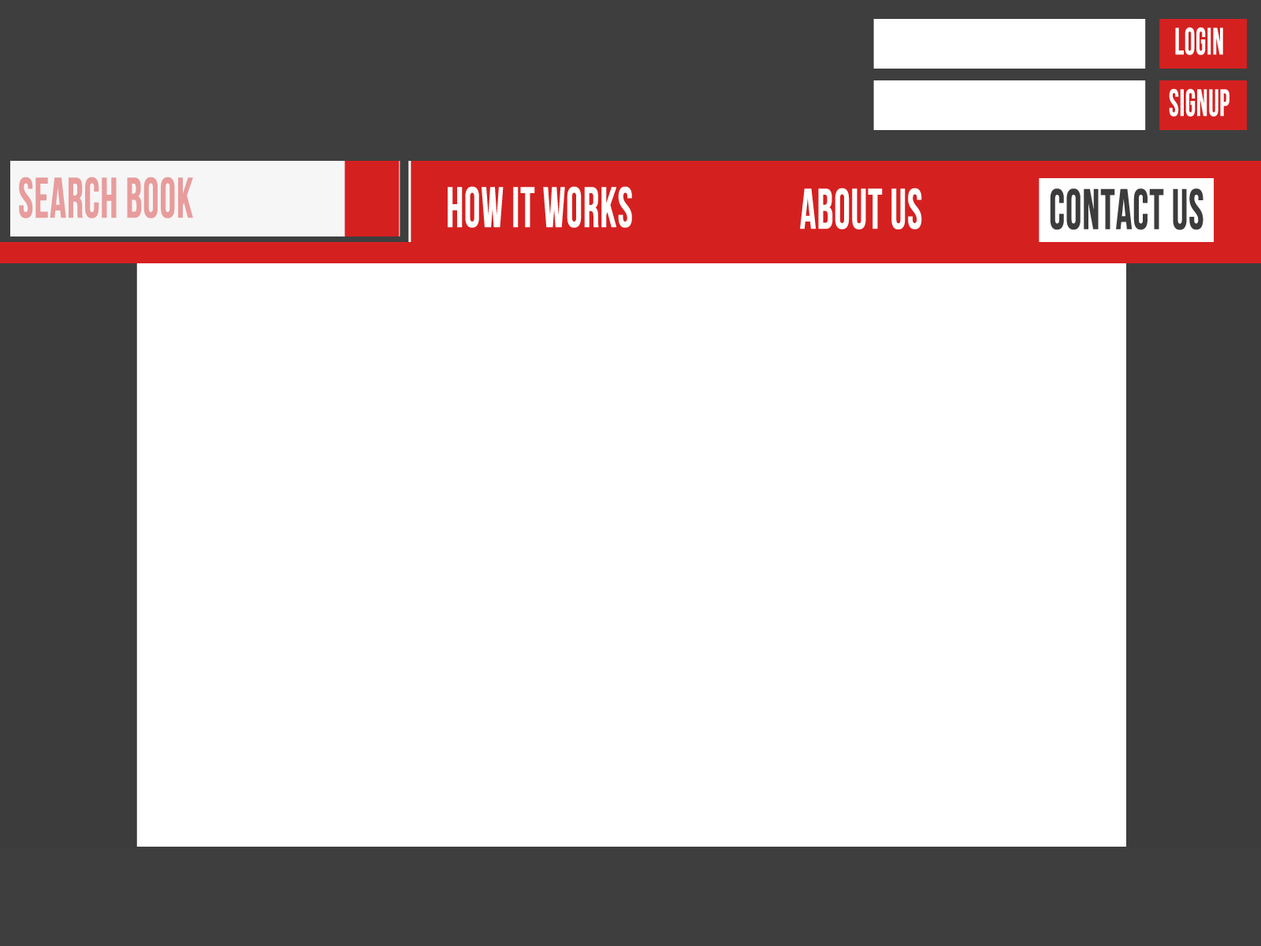
<style>
.page{position:relative;width:1261px;height:946px;background:#ffffff}
.page>*{position:absolute;margin:0}
.t1{font:37.8px "BebasNeue";color:#ffffff;font-weight:bold;scale:0.7 1}
.t2{font:56.7px "BebasNeue";color:#e89c9c;font-weight:bold;scale:0.7 1}
.t3{font:56.7px "BebasNeue";color:#ffffff;font-weight:bold;scale:0.7 1}
.t4{font:56.7px "BebasNeue";color:#3c3c3c;font-weight:bold;scale:0.7 1}
</style>
<div class="page">
<p class="t1" style="left:1175px;top:27px;width:48px;height:28px">LOGIN</p>
<p class="t1" style="left:1169px;top:88px;width:60px;height:29px">SIGNUP</p>
<p class="t2" style="left:19px;top:177px;width:174px;height:41px">SEARCH BOOK</p>
<p class="t3" style="left:448px;top:186px;width:184px;height:42px">HOW IT WORKS</p>
<p class="t3" style="left:800px;top:188px;width:122px;height:41px">ABOUT US</p>
<p class="t4" style="left:1050px;top:188px;width:153px;height:42px">CONTACT US</p>
</div>
